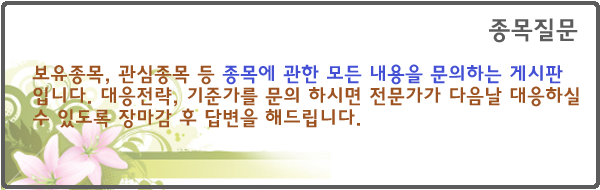
<style>
.page{position:relative;width:600px;height:190px;background:#ffffff}
.page>*{position:absolute;margin:0}
.t1{font:25px "HaanYGodic24";color:#5c5c5c}
.t2{font:20px/22px "HaanYGodic24";color:#9d5321}
.t3{font:20px/22px "HaanYGodic24";color:#4350d4}
</style>
<div class="page">
<p class="t1" style="left:489px;top:18px;width:89px;height:25px">종목질문</p>
<p class="t2" style="left:32px;top:64px;width:547px;height:65px">보유종목, 관심종목 등 <span class="t3">종목에 관한 모든 내용을 문의하는 게시판</span> 입니다. 대응전략, 기준가를 문의 하시면 전문가가 다음날 대응하실 수 있도록 장마감 후 답변을 해드립니다.</p>
</div>
